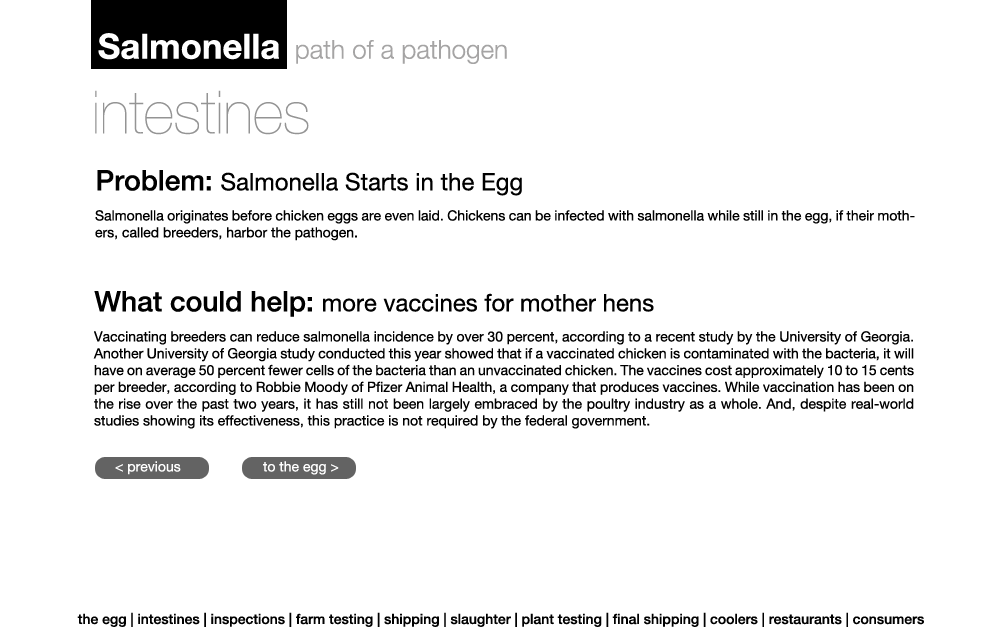
<style>
.page{position:relative;width:1000px;height:642px;background:#ffffff}
.page>*{position:absolute;margin:0}
.t1{font:59.6px "HelveticaNeue-UltraLight";color:#949494}
.t2{font:24px "HelveticaNeue";color:#000000}
.t3{font:28.1px "HelveticaNeue-Medium";color:#000000}
.t4{font:14px "HelveticaNeue";color:#000000}
.t5{font:14px "HelveticaNeue";color:#ffffff}
.t6{font:14px "HelveticaNeue-Medium";color:#000000}
</style>
<div class="page">
<p class="t1" style="left:95px;top:90px;width:214px;height:45px">intestines</p>
<p class="t2" style="left:97px;top:170px;width:425px;height:26px"><span class="t3">Problem: </span>Salmonella Starts in the Egg</p>
<p class="t4" style="left:95px;top:210px;width:820px;height:31px;text-align:justify">Salmonella originates before chicken eggs are even laid. Chickens can be infected with salmonella while still in the egg, if their mothers, called breeders, harbor the pathogen.</p>
<p class="t2" style="left:94px;top:291px;width:560px;height:26px"><span class="t3">What could help: </span>more vaccines for mother hens</p>
<p class="t4" style="left:93px;top:331px;width:821px;height:98px;text-align:justify">Vaccinating breeders can reduce salmonella incidence by over 30 percent, according to a recent study by the University of Georgia. Another University of Georgia study conducted this year showed that if a vaccinated chicken is contaminated with the bacteria, it will have on average 50 percent fewer cells of the bacteria than an unvaccinated chicken. The vaccines cost approximately 10 to 15 cents per breeder, according to Robbie Moody of Pfizer Animal Health, a company that produces vaccines. While vaccination has been on the rise over the past two years, it has still not been largely embraced by the poultry industry as a whole. And, despite real-world studies showing its effectiveness, this practice is not required by the federal government.</p>
<p class="t5" style="left:115px;top:461px;width:66px;height:14px">&lt; previous</p>
<p class="t5" style="left:263px;top:461px;width:76px;height:14px">to the egg &gt;</p>
<p class="t6" style="left:77px;top:612px;width:847px;height:15px">the egg | intestines | inspections | farm testing | shipping | slaughter | plant testing | final shipping | coolers | restaurants | consumers</p>
</div>
